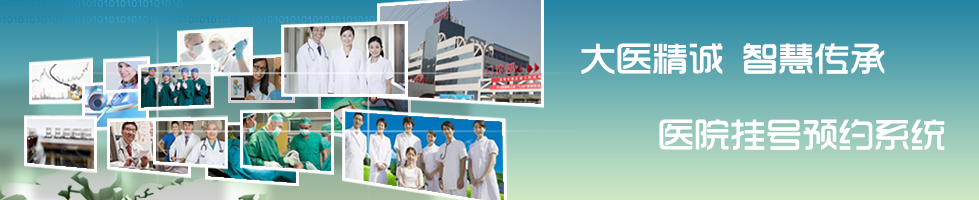
<style>
.page{position:relative;width:979px;height:200px}
.page>*{position:absolute;margin:0}
.t1{font:36px "TRENDS";color:#ffffff}
</style>
<div class="page">
<p class="t1" style="left:581px;top:43px;width:304px;height:31px">大医精诚 智慧传承</p>
<p class="t1" style="left:659px;top:119px;width:286px;height:31px">医院挂号预约系统</p>
</div>
